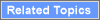
<style>
.page{position:relative;width:100px;height:20px;background:#6699ff}
.page>*{position:absolute;margin:0}
.t1{font:11.7px "Arial-BoldMT";color:#ffffff}
</style>
<div class="page">
<p class="t1" style="left:7px;top:5px;width:84px;height:12px">Related Topics</p>
</div>
